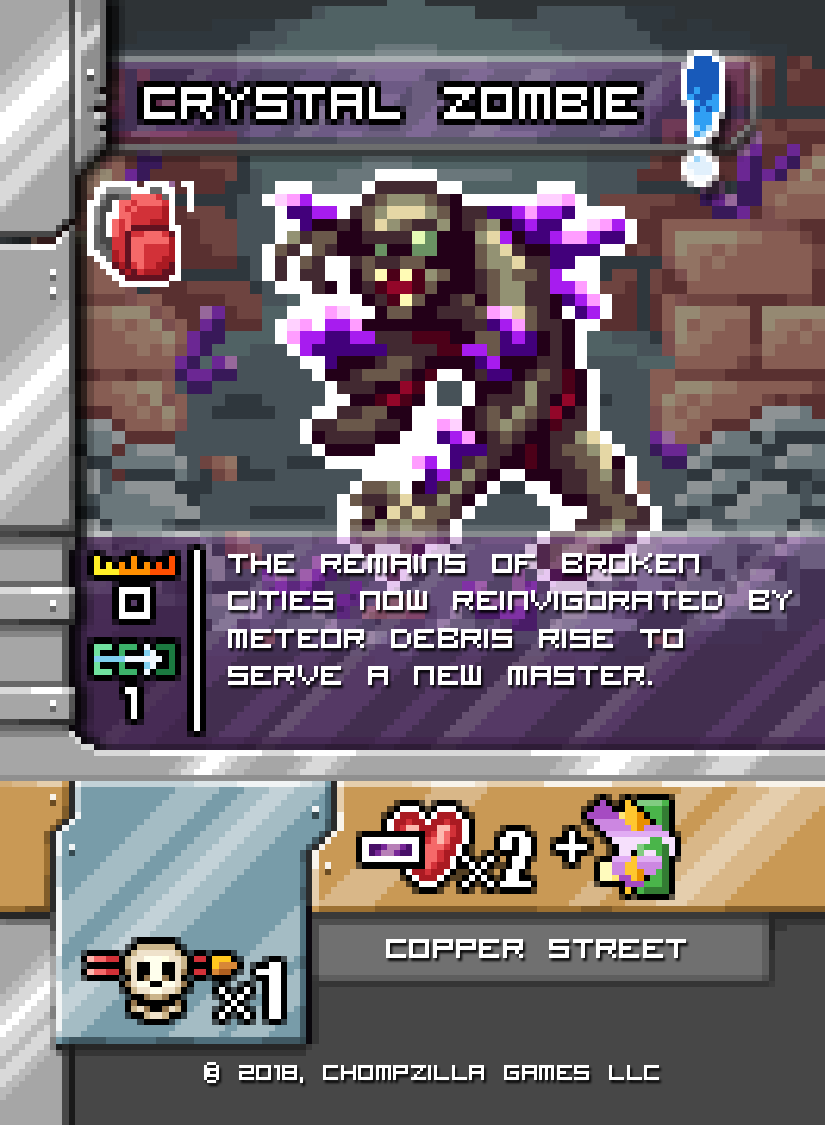
<style>
.page{position:relative;width:825px;height:1125px}
.page>*{position:absolute;margin:0}
.t1{font:50px/37.5px "VisitorTT2BRK";color:#ffffff}
.t2{font:50px "VisitorTT2BRK";color:#ffffff}
.t3{font:37.5px "VisitorTT2BRK";color:#ffffff}
</style>
<div class="page">
<p class="t1" style="left:228px;top:553px;width:564px;height:132px">The remains of broken<br>cities now reinvigorated by<br>meteor debris rise to <br>serve a new master.</p>
<p class="t2" style="left:386px;top:939px;width:300px;height:19px">Copper Street</p>
<p class="t3" style="left:204px;top:1062px;width:455px;height:21px">© 2018, Chompzilla Games LLC</p>
</div>
